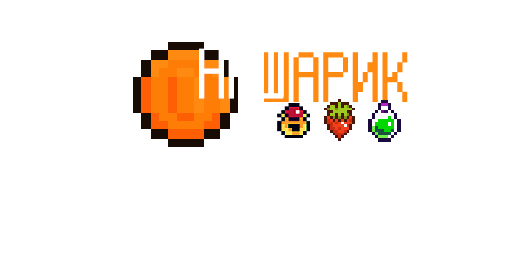
<style>
.page{position:relative;width:512px;height:256px;background:#ffffff}
.page>*{position:absolute;margin:0}
.t1{font:79px "Mercutio-NBP-Basic";color:#ffffff}
.t2{font:79px "Mercutio-NBP-Basic";color:#ff8a12}
</style>
<div class="page">
<p class="t1" style="left:199px;top:48px;width:85px;height:51px">НАШ</p>
<p class="t2" style="left:264px;top:52px;width:144px;height:50px">ШАРИК</p>
</div>
